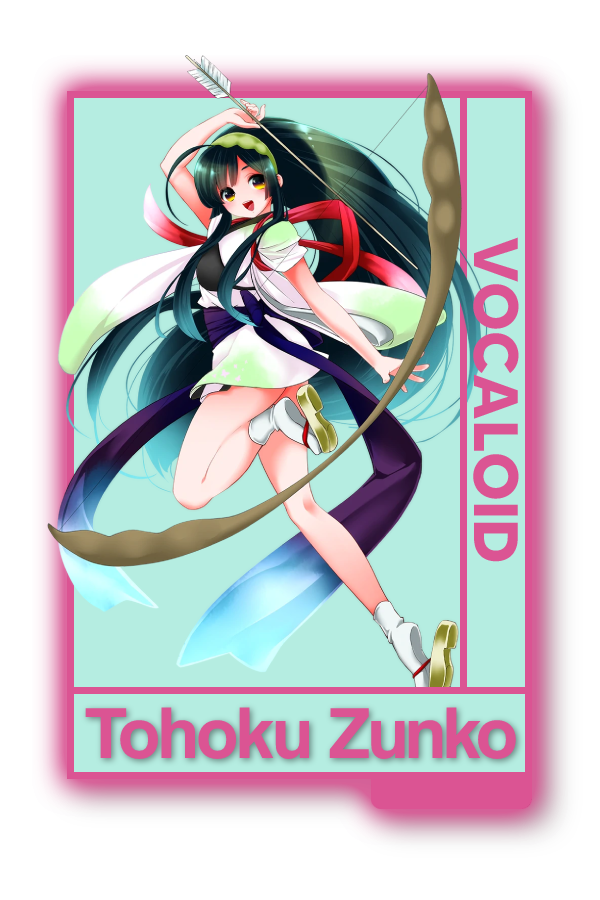
<style>
.page{position:relative;width:600px;height:900px;background:#b5ede1}
.page>*{position:absolute;margin:0}
.t1{font:62.5px "MADETOMMY-Bold";color:#db5493}
.t2{font:75px "CoolveticaRg-Regular";color:#db5493}
</style>
<div class="page">
<p class="t1" style="left:473px;top:237px;width:46px;height:325px;rotate:90deg">VOCALOID</p>
<p class="t2" style="left:85px;top:707px;width:431px;height:52px">Tohoku Zunko</p>
</div>
